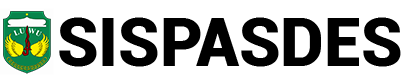
<style>
.page{position:relative;width:403px;height:83px;background:#ffffff}
.page>*{position:absolute;margin:0}
.t1{font:66.7px "Roboto-Black";color:#000000}
</style>
<div class="page">
<p class="t1" style="left:59px;top:17px;width:342px;height:50px">SISPASDES</p>
</div>
